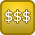
<style>
.page{position:relative;width:35px;height:35px}
.page>*{position:absolute;margin:0}
.t1{font:14px "Verdana";color:#ffffff}
</style>
<div class="page">
<p class="t1" style="left:5px;top:10px;width:25px;height:13px">$$$</p>
</div>
